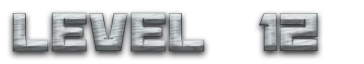
<style>
.page{position:relative;width:364px;height:64px;background:#ffffff}
.page>*{position:absolute;margin:0}
.t1{font:60px "BananaBrick"}
</style>
<div class="page">
<p class="t1" style="left:12px;top:12px;width:306px;height:40px">Level  12</p>
</div>
